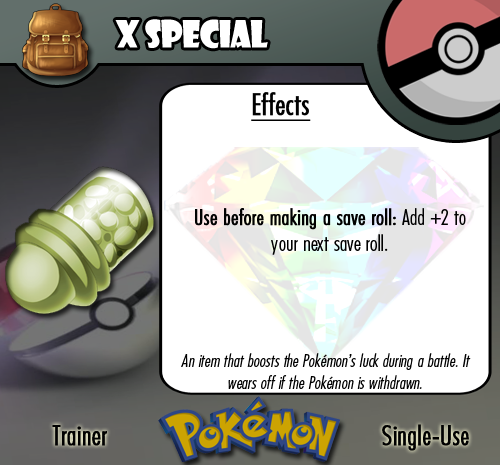
<style>
.page{position:relative;width:500px;height:465px;background:#ffffff}
.page>*{position:absolute;margin:0}
.t1{font:36.7px "ShowcardGothic-Reg";letter-spacing:-0.025em;color:#ffffff;scale:0.91 1}
.t2{font:22.2px "FuturaCondensedBQ-Light";color:#010101;font-weight:bold}
.t3{font:27.8px "FuturaCondensedBQ-Light";color:#010101;font-weight:bold}
.t4{font:30.6px "FuturaCondensedBQ-Light";color:#010101;font-weight:bold;text-decoration:underline}
.t5{font:22.2px "FuturaCondensedBQ-Light";color:#010101}
.t6{font:18.1px "FuturaCondensedBQ-Light";color:#010101;font-style:italic}
</style>
<div class="page">
<p class="t1" style="left:115px;top:19px;width:153px;height:30px">X Special</p>
<p class="t2" style="left:195px;top:92px;width:271px;height:163px"><span class="t3">  </span><span class="t4">Effects<br><br><br><br><br><br><br></span>Use before making a save roll: <span class="t5">Add +2 to your next save roll.</span></p>
<p class="t6" style="left:181px;top:353px;width:290px;height:36px;text-align:center">An item that boosts the Pokémon’s luck during a battle. It wears off if the Pokémon is withdrawn.</p>
<p class="t3" style="left:52px;top:425px;width:55px;height:21px">Trainer</p>
<p class="t3" style="left:382px;top:424px;width:87px;height:27px">Single-Use</p>
</div>
